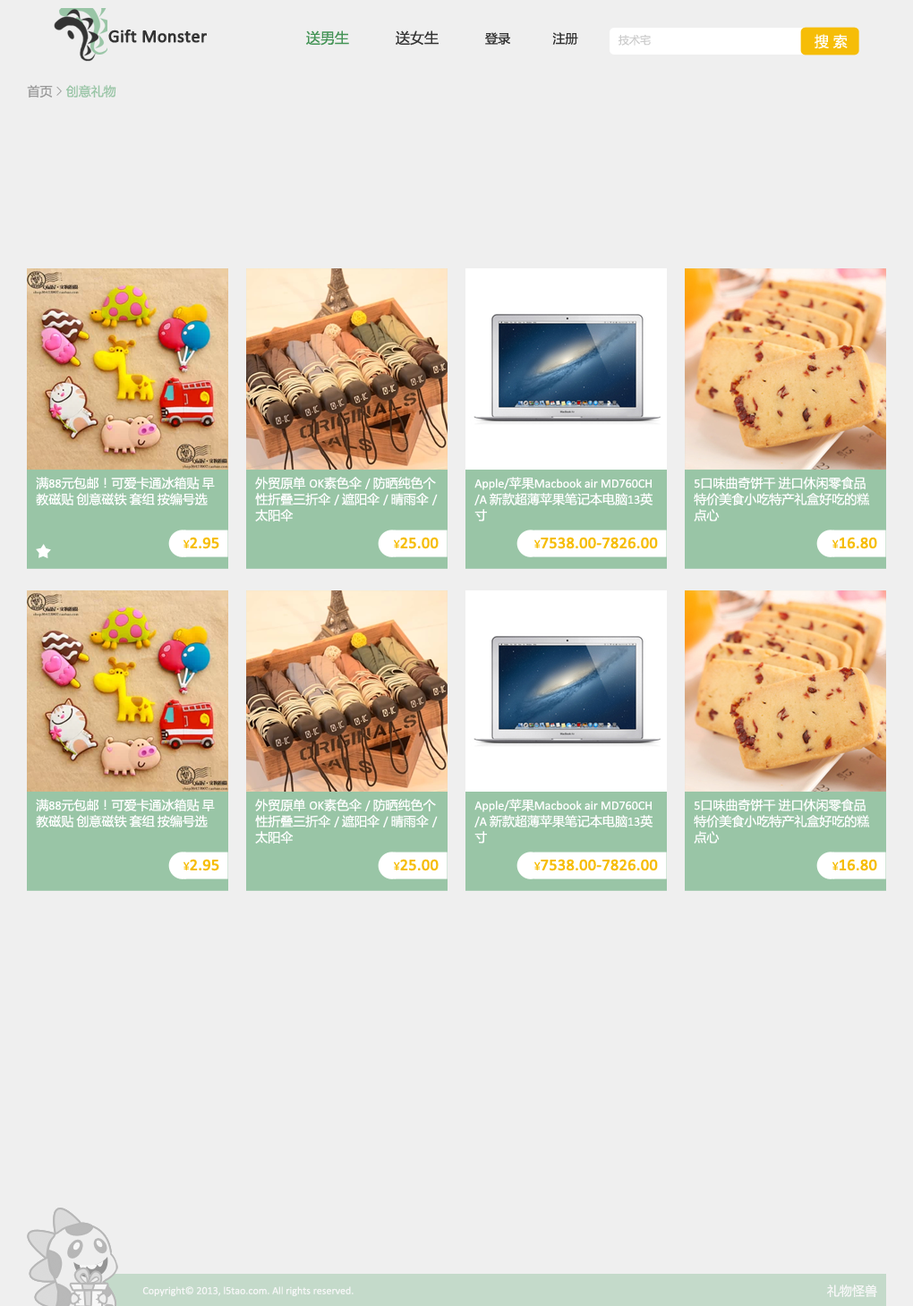
<style>
.page{position:relative;width:913px;height:1306px;background:#efefef}
.page>*{position:absolute;margin:0}
.t1{font:17.9px "Calibri";color:#333333;font-weight:bold}
.t2{font:12.5px "MicrosoftYaHei";color:#333333}
.t3{font:14.3px "MicrosoftYaHei";color:#439355}
.t4{font:14.3px "MicrosoftYaHei";color:#333333}
.t5{font:10.7px "MicrosoftYaHei";color:#cccccc}
.t6{font:14.3px "MicrosoftYaHei";color:#ffffff}
.t7{font:12.5px "MicrosoftYaHei";color:#99c5a6}
.t8{font:12.5px "MicrosoftYaHei";color:#999999}
.t9{font:12.5px "SimSun-ExtB";color:#999999}
.t10{font:12.5px/16.1px "MicrosoftYaHei";color:#ffffff}
.t11{font:12.5px/16.1px "Calibri";color:#ffffff}
.t12{font:16.1px "Calibri";color:#f6bd07;font-weight:bold}
.t13{font:12.5px "Calibri";color:#f6bd07}
.t14{font:10.7px "Calibri";color:#ffffff}
.t15{font:12.5px "MicrosoftYaHei";color:#ffffff}
</style>
<div class="page">
<p class="t1" style="left:108px;top:30px;width:99px;height:13px">Gift Monster</p>
<p class="t2" style="left:306px;top:30px;width:272px;height:16px"><span class="t3">送男生</span><span class="t4">           送女生           </span>登录          注册</p>
<p class="t5" style="left:618px;top:34px;width:33px;height:12px">技术宅</p>
<p class="t6" style="left:814px;top:34px;width:33px;height:15px">搜 索</p>
<p class="t7" style="left:27px;top:85px;width:89px;height:13px"><span class="t8">首页 </span><span class="t9">&gt; </span>创意礼物</p>
<p class="t10" style="left:36px;top:477px;width:179px;height:29px">满<span class="t11">88</span>元包邮！可爱卡通冰箱贴 早<br>教磁贴 创意磁铁 套组 按编号选</p>
<p class="t10" style="left:255px;top:477px;width:183px;height:45px">外贸原单 <span class="t11">OK</span>素色伞 <span class="t11">/ </span>防晒纯色个<br>性折叠三折伞 <span class="t11">/ </span>遮阳伞 <span class="t11">/ </span>晴雨伞 <span class="t11">/<br></span>太阳伞</p>
<p class="t11" style="left:474px;top:477px;width:179px;height:45px">Apple/<span class="t10">苹果</span>Macbook air MD760CH<br>/A <span class="t10">新款超薄苹果笔记本电脑</span>13<span class="t10">英<br>寸</span></p>
<p class="t10" style="left:693px;top:477px;width:177px;height:45px"><span class="t11">5</span>口味曲奇饼干 进口休闲零食品<br>特价美食小吃特产礼盒好吃的糕<br>点心</p>
<p class="t12" style="left:183px;top:537px;width:36px;height:12px"><span class="t13">¥</span>2.95</p>
<p class="t12" style="left:394px;top:537px;width:44px;height:12px"><span class="t13">¥</span>25.00</p>
<p class="t12" style="left:534px;top:537px;width:124px;height:12px"><span class="t13">¥</span>7538.00-7826.00</p>
<p class="t12" style="left:832px;top:537px;width:45px;height:12px"><span class="t13">¥</span>16.80</p>
<p class="t10" style="left:36px;top:799px;width:179px;height:29px">满<span class="t11">88</span>元包邮！可爱卡通冰箱贴 早<br>教磁贴 创意磁铁 套组 按编号选</p>
<p class="t10" style="left:255px;top:799px;width:183px;height:45px">外贸原单 <span class="t11">OK</span>素色伞 <span class="t11">/ </span>防晒纯色个<br>性折叠三折伞 <span class="t11">/ </span>遮阳伞 <span class="t11">/ </span>晴雨伞 <span class="t11">/<br></span>太阳伞</p>
<p class="t11" style="left:474px;top:799px;width:179px;height:45px">Apple/<span class="t10">苹果</span>Macbook air MD760CH<br>/A <span class="t10">新款超薄苹果笔记本电脑</span>13<span class="t10">英<br>寸</span></p>
<p class="t10" style="left:693px;top:799px;width:177px;height:45px"><span class="t11">5</span>口味曲奇饼干 进口休闲零食品<br>特价美食小吃特产礼盒好吃的糕<br>点心</p>
<p class="t12" style="left:183px;top:859px;width:36px;height:13px"><span class="t13">¥</span>2.95</p>
<p class="t12" style="left:394px;top:859px;width:44px;height:13px"><span class="t13">¥</span>25.00</p>
<p class="t12" style="left:534px;top:859px;width:124px;height:13px"><span class="t13">¥</span>7538.00-7826.00</p>
<p class="t12" style="left:832px;top:859px;width:45px;height:13px"><span class="t13">¥</span>16.80</p>
<p class="t14" style="left:142px;top:1287px;width:211px;height:10px">Copyright© 2013, l5tao.com. All rights reserved.</p>
<p class="t15" style="left:827px;top:1285px;width:50px;height:13px">礼物怪兽</p>
</div>
